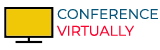
<style>
.page{position:relative;width:160px;height:50px;background:#ffffff}
.page>*{position:absolute;margin:0}
.t1{font:14px "Montserrat-Regular";color:#065579}
.t2{font:14px "Montserrat-Regular";color:#fe002a}
</style>
<div class="page">
<p class="t1" style="left:57px;top:9px;width:101px;height:27px">CONFERENCE <br><span class="t2">VIRTUALLY</span></p>
</div>
